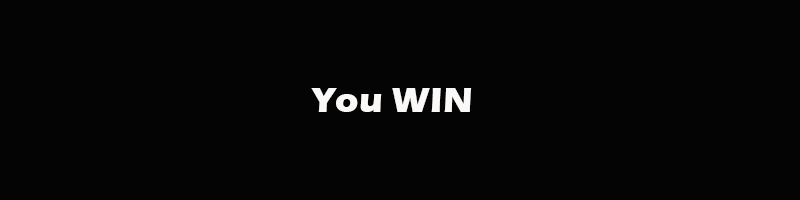
<style>
.page{position:relative;width:800px;height:200px;background:#040404}
.page>*{position:absolute;margin:0}
.t1{font:36px "ErasITC-Bold";color:#fbf8f8}
</style>
<div class="page">
<p class="t1" style="left:311px;top:88px;width:161px;height:24px">You WIN</p>
</div>
